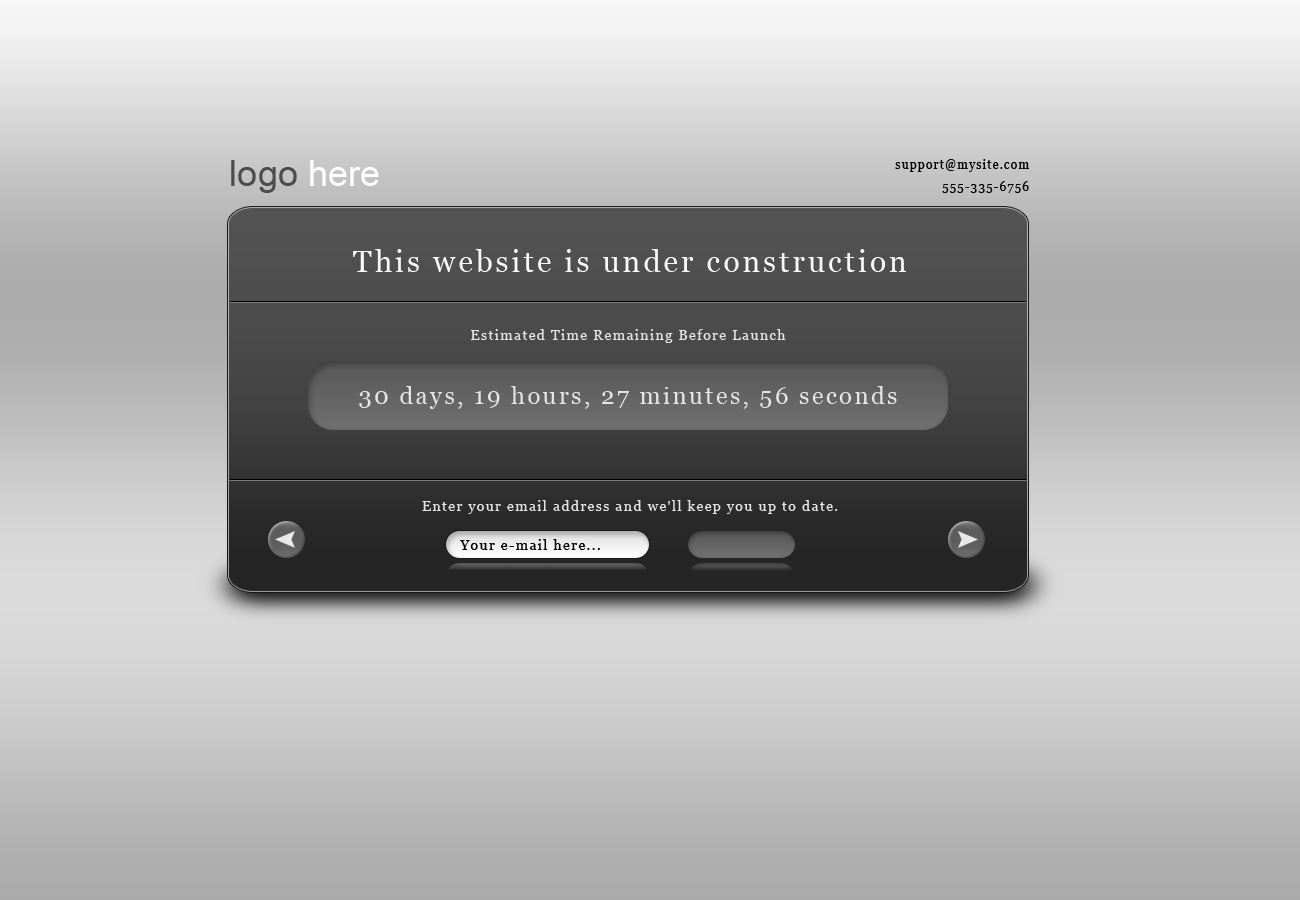
<style>
.page{position:relative;width:1300px;height:900px}
.page>*{position:absolute;margin:0}
.t1{font:12px/11px "Georgia";letter-spacing:0.1em;color:#010101}
.t2{font:30px "Georgia";letter-spacing:0.1em;color:#e5e5e5}
.t3{font:14px "Georgia";letter-spacing:0.1em;color:#e5e5e5}
.t4{font:24px "Georgia";letter-spacing:0.1em;color:#e5e5e5}
.t5{font:14px "Georgia";letter-spacing:0.1em;color:#010101}
</style>
<div class="page">
<p class="t1" style="left:895px;top:159px;width:134px;height:34px;text-align:right">support@mysite.com<br><br>555-335-6756</p>
<p class="t2" style="left:353px;top:249px;width:553px;height:23px">This website is under construction</p>
<p class="t3" style="left:471px;top:329px;width:315px;height:14px">Estimated Time Remaining Before Launch</p>
<p class="t4" style="left:359px;top:386px;width:538px;height:23px">30 days, 19 hours, 27 minutes, 56 seconds</p>
<p class="t3" style="left:422px;top:500px;width:416px;height:14px">Enter your email address and we'll keep you up to date.</p>
<p class="t5" style="left:460px;top:539px;width:140px;height:11px">Your e-mail here...</p>
</div>
